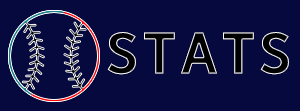
<style>
.page{position:relative;width:300px;height:111px;background:#05093e}
.page>*{position:absolute;margin:0}
.t1{font:54.2px "OTGaeseongsidaeR";letter-spacing:0.08em;color:#000000}
</style>
<div class="page">
<p class="t1" style="left:107px;top:32px;width:182px;height:43px">STATS</p>
</div>
